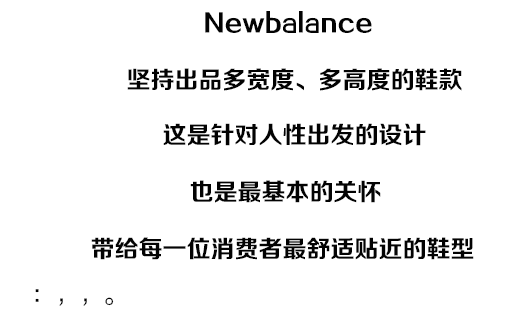
<style>
.page{position:relative;width:530px;height:335px;background:#ffffff}
.page>*{position:absolute;margin:0}
.t1{font:24px "FZZCHJW--GB1-0";color:#030303}
.t2{font:24px "FZZHJW--GB1-0";color:#030303}
</style>
<div class="page">
<p class="t1" style="left:205px;top:11px;width:167px;height:22px">Newbalance</p>
<p class="t1" style="left:127px;top:68px;width:335px;height:23px">坚持出品多宽度、多高度的鞋款</p>
<p class="t1" style="left:163px;top:123px;width:263px;height:23px">这是针对人性出发的设计</p>
<p class="t1" style="left:190px;top:180px;width:191px;height:23px">也是最基本的关怀</p>
<p class="t1" style="left:91px;top:237px;width:383px;height:23px">带给每一位消费者最舒适贴近的鞋型</p>
<p class="t2" style="left:35px;top:289px;width:79px;height:17px">：，，。</p>
</div>
